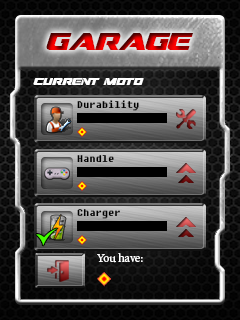
<style>
.page{position:relative;width:240px;height:320px}
.page>*{position:absolute;margin:0}
.t1{font:24px "DreamMMA"}
.t2{font:10px "DreamMMA";color:#ffffff}
.t3{font:10px "Fixedsys";color:#000000}
.t4{font:12px "MinionPro-Regular";color:#ffffff}
</style>
<div class="page">
<p class="t1" style="left:46px;top:33px;width:148px;height:17px">garage</p>
<p class="t2" style="left:33px;top:78px;width:111px;height:7px">current moto</p>
<p class="t3" style="left:77px;top:100px;width:62px;height:11px">Durability</p>
<p class="t3" style="left:77px;top:155px;width:37px;height:7px">Handle</p>
<p class="t3" style="left:77px;top:209px;width:43px;height:10px">Charger</p>
<p class="t4" style="left:97px;top:253px;width:46px;height:10px">You have:</p>
</div>
